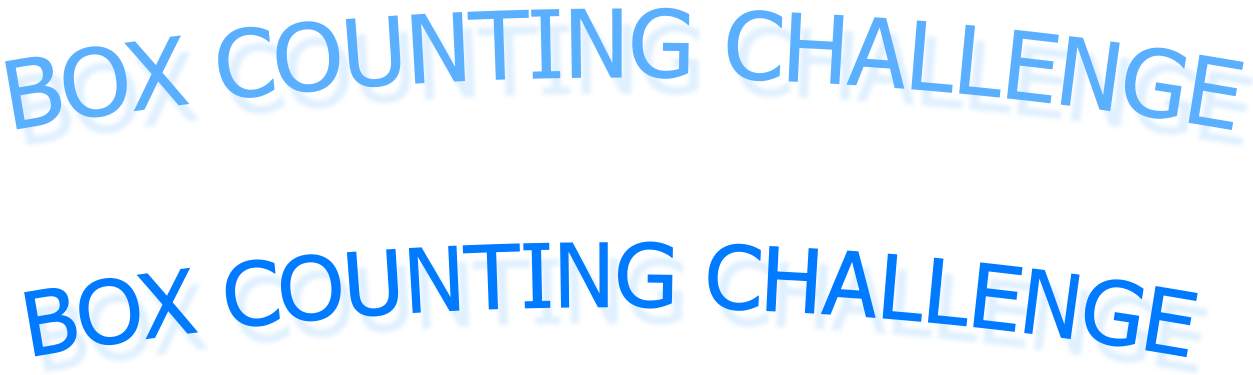
<style>
.page{position:relative;width:1253px;height:375px;background:#ffffff}
.page>*{position:absolute;margin:0}
.t1{font:95px "Tahoma";color:#5ab0ff}
.t2{font:90px "Tahoma";color:#007aff}
</style>
<div class="page">
<p class="t1" style="left:5px;top:7px;width:1239px;height:124px">BOX COUNTING CHALLENGE</p>
<p class="t2" style="left:24px;top:241px;width:1174px;height:117px">BOX COUNTING CHALLENGE</p>
</div>
